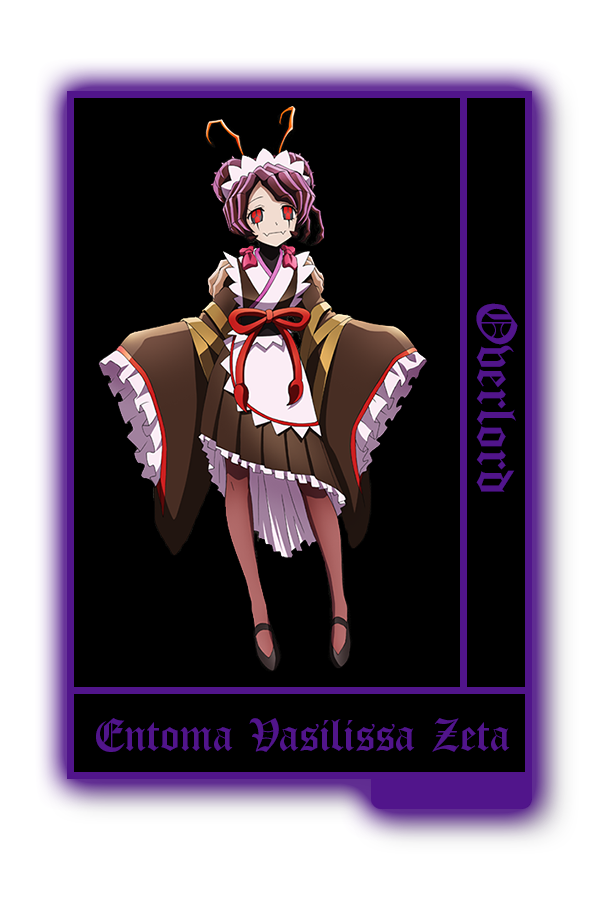
<style>
.page{position:relative;width:600px;height:900px;background:#000000}
.page>*{position:absolute;margin:0}
.t1{font:61.5px "OldLondon";color:#51158b}
.t2{font:50.5px "OldLondon";color:#51158b}
</style>
<div class="page">
<p class="t1" style="left:476px;top:303px;width:42px;height:189px;rotate:90deg">Overlord</p>
<p class="t2" style="left:96px;top:718px;width:414px;height:34px">Entoma Vasilissa Zeta</p>
</div>
